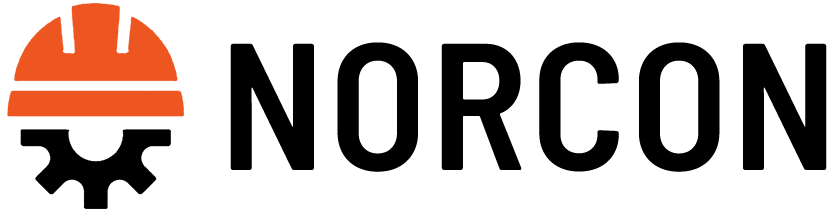
<style>
.page{position:relative;width:831px;height:213px;background:#ffffff}
.page>*{position:absolute;margin:0}
.t1{font:180px "BarlowSemiCondensed-SemiBold";letter-spacing:0.02em;color:#000000}
</style>
<div class="page">
<p class="t1" style="left:230px;top:42px;width:597px;height:130px">NORCON</p>
</div>
